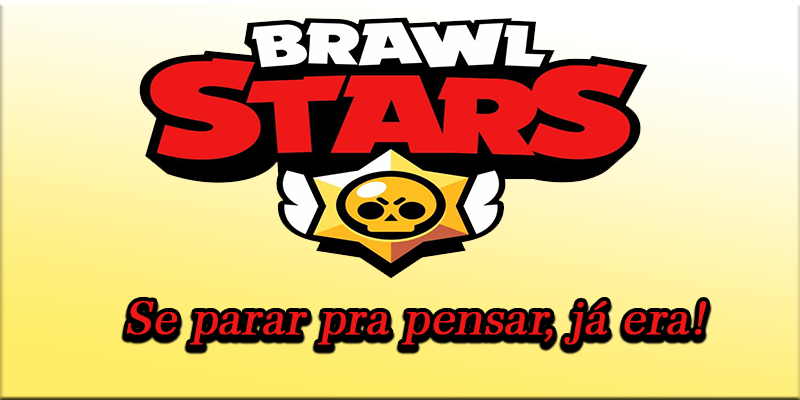
<style>
.page{position:relative;width:800px;height:400px}
.page>*{position:absolute;margin:0}
.t1{font:45.7px "Century751BT-RomanNo2B";color:#ee1818;font-weight:bold;font-style:italic}
</style>
<div class="page">
<p class="t1" style="left:126px;top:301px;width:580px;height:44px">Se parar pra pensar, já era!</p>
</div>
